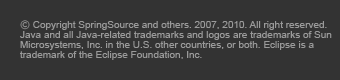
<style>
.page{position:relative;width:340px;height:80px;background:#333333}
.page>*{position:absolute;margin:0}
.t1{font:10px/10px "ArialMT";color:#9a9a9a}
.t2{font:10px/10px "Verdana";color:#9a9a9a}
</style>
<div class="page">
<p class="t1" style="left:20px;top:20px;width:312px;height:40px"><span class="t2">©</span> Copyright SpringSource and others. 2007, 2010. All right reserved. Java and all Java-related trademarks and logos are trademarks of Sun Microsystems, Inc. in the U.S. other countries, or both. Eclipse is a trademark of the Eclipse Foundation, Inc.</p>
</div>
